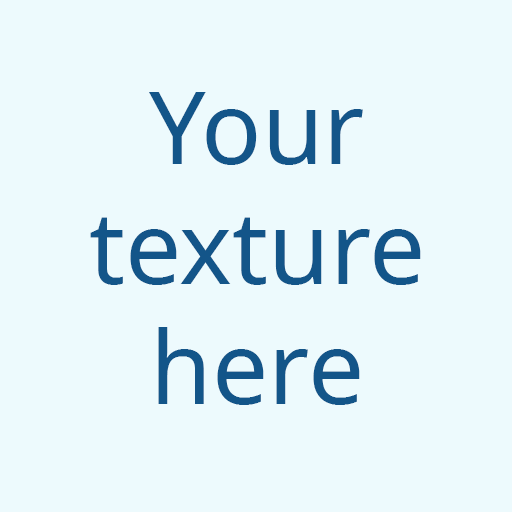
<style>
.page{position:relative;width:512px;height:512px;background:#edfafd}
.page>*{position:absolute;margin:0}
.t1{font:100px "NotoSans-Regular";color:#135589}
</style>
<div class="page">
<p class="t1" style="left:90px;top:92px;width:331px;height:313px;text-align:center">Your texture here</p>
</div>
